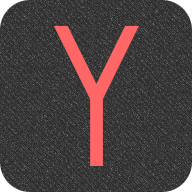
<style>
.page{position:relative;width:192px;height:192px;background:#2d2d2d}
.page>*{position:absolute;margin:0}
.t1{font:200px "Abel-Regular";color:#ff6666}
</style>
<div class="page">
<p class="t1" style="left:54px;top:25px;width:85px;height:141px">Y</p>
</div>
